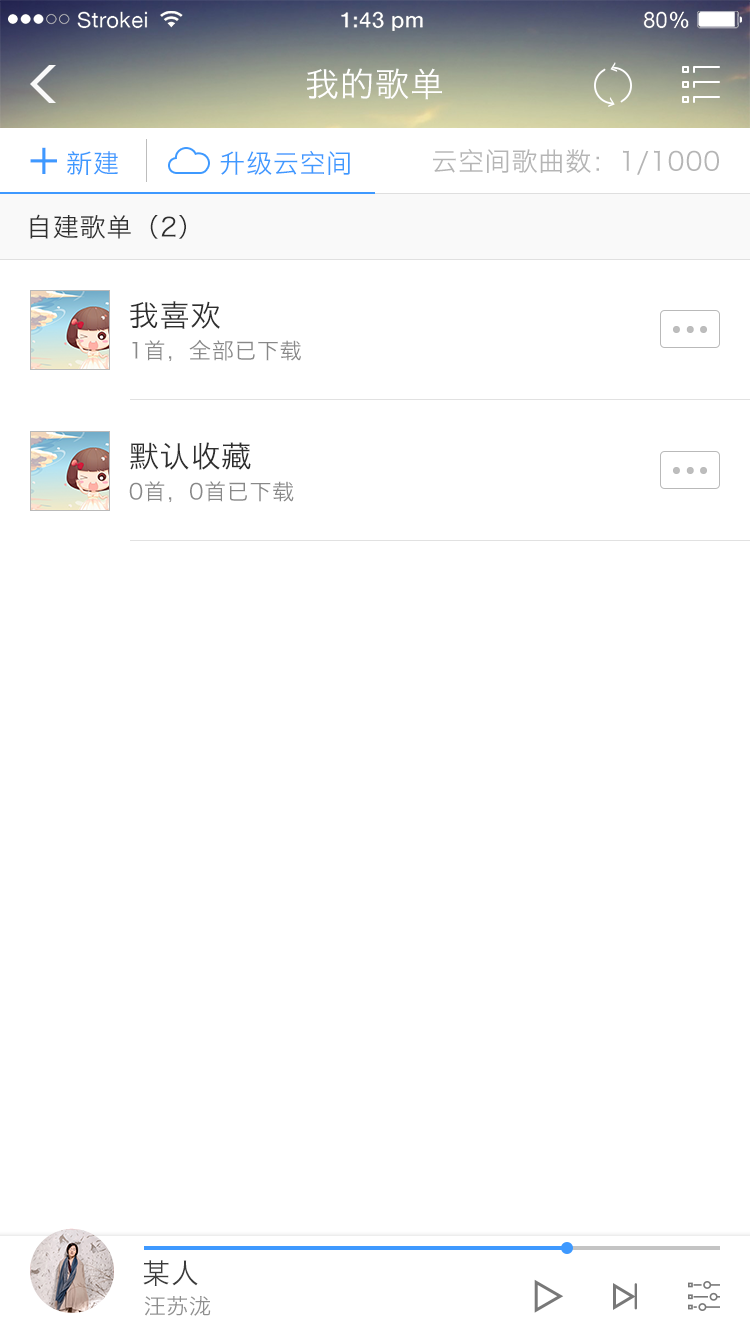
<style>
.page{position:relative;width:750px;height:1334px;background:#ffffff}
.page>*{position:absolute;margin:0}
.t1{font:33.9px "HiraginoSansGB-W3";letter-spacing:0.03em;color:#ffffff}
.t2{font:47.7px "HiraginoSansGB-W3";letter-spacing:0.03em;color:#3e99ff}
.t3{font:26px "HiraginoSansGB-W3";letter-spacing:0.03em;color:#3e99ff}
.t4{font:26px "HiraginoSansGB-W3";letter-spacing:0.03em;color:#b5b5b5}
.t5{font:26px "HiraginoSansGB-W3";letter-spacing:0.03em;color:#2e2e2e}
.t6{font:29.9px "HiraginoSansGB-W3";letter-spacing:0.03em;color:#2e2e2e}
.t7{font:21.9px "HiraginoSansGB-W3";letter-spacing:0.03em;color:#888888}
.t8{font:28px "HiraginoSansGB-W3";letter-spacing:0.03em;color:#3b3b3b}
.t9{font:22px "HiraginoSansGB-W3";letter-spacing:0.03em;color:#8f8f8f}
</style>
<div class="page">
<p class="t1" style="left:306px;top:68px;width:136px;height:32px">我的歌单</p>
<p class="t2" style="left:30px;top:147px;width:27px;height:27px">+</p>
<p class="t3" style="left:220px;top:150px;width:130px;height:25px">升级云空间</p>
<p class="t4" style="left:433px;top:148px;width:286px;height:27px">云空间歌曲数：1/1000</p>
<p class="t3" style="left:67px;top:151px;width:51px;height:24px">新建</p>
<p class="t5" style="left:30px;top:214px;width:156px;height:25px">自建歌单（2）</p>
<p class="t6" style="left:130px;top:301px;width:90px;height:28px">我喜欢</p>
<p class="t7" style="left:132px;top:339px;width:169px;height:23px">1首，全部已下载</p>
<p class="t6" style="left:130px;top:442px;width:121px;height:28px">默认收藏</p>
<p class="t7" style="left:129px;top:481px;width:165px;height:22px">0首，0首已下载</p>
<p class="t8" style="left:143px;top:1260px;width:55px;height:26px">某人</p>
<p class="t9" style="left:144px;top:1296px;width:67px;height:20px">汪苏泷</p>
</div>
